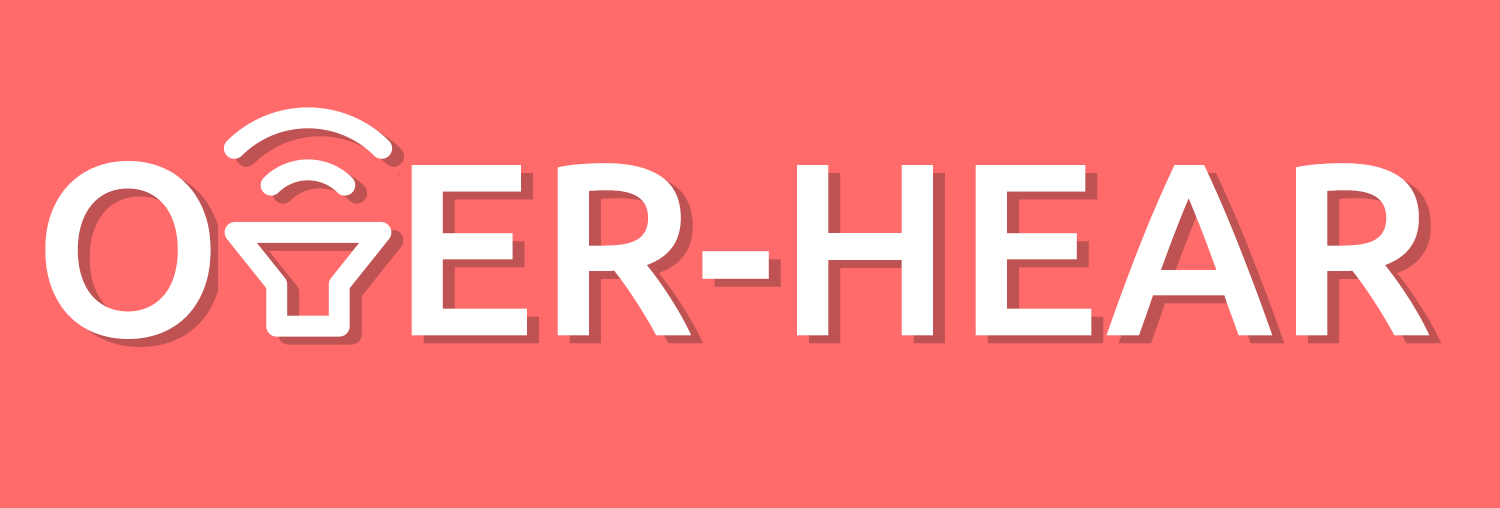
<style>
.page{position:relative;width:1500px;height:508px;background:#ff6b6b}
.page>*{position:absolute;margin:0}
.t1{font:245.4px "Ubuntu-Medium";letter-spacing:0.01em;color:#ffffff}
</style>
<div class="page">
<p class="t1" style="left:45px;top:161px;width:1385px;height:178px">OVER-HEAR</p>
<p class="t1" style="left:57px;top:169px;width:1385px;height:178px">OVER-HEAR</p>
</div>
